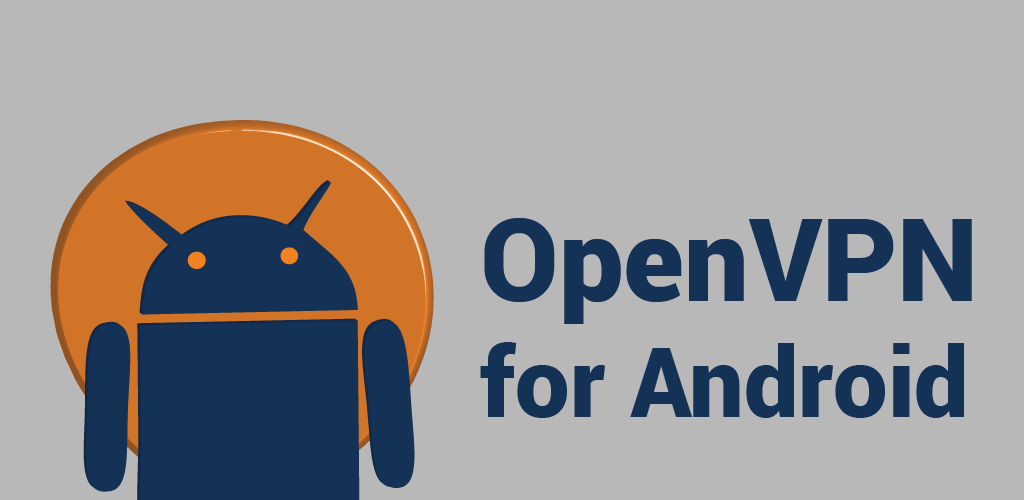
<style>
.page{position:relative;width:1024px;height:500px;background:#b8b8b8}
.page>*{position:absolute;margin:0}
.t1{font:97px "Roboto-Black";color:#143156}
.t2{font:115px "Roboto-Black";color:#143156}
</style>
<div class="page">
<p class="t1" style="left:480px;top:218px;width:492px;height:200px"><span class="t2">OpenVPN<br></span>for Android</p>
</div>
